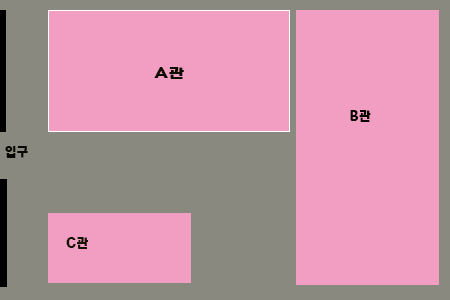
<style>
.page{position:relative;width:450px;height:300px;background:#f19ec2}
.page>*{position:absolute;margin:0}
.t1{font:12px "HeadlineR-HM";color:#0e0d01;scale:1.33 1}
.t2{font:12px "HeadlineR-HM";color:#8a8980;scale:1.33 1}
.t3{font:12px "HeadlineR-HM";color:#070601}
.t4{font:12px "HeadlineR-HM";color:#171502}
</style>
<div class="page">
<p class="t1" style="left:154px;top:67px;width:30px;height:12px"><span class="t2"><br><br><br><br></span>A관</p>
<p class="t3" style="left:350px;top:110px;width:21px;height:12px">B관</p>
<p class="t3" style="left:5px;top:146px;width:23px;height:12px">입구</p>
<p class="t4" style="left:66px;top:237px;width:22px;height:12px">C관</p>
</div>
